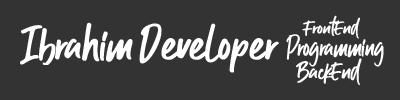
<style>
.page{position:relative;width:400px;height:100px;background:#333333}
.page>*{position:absolute;margin:0}
.t1{font:18.7px "GuthenBlootsPersonalUse";color:#ffffff;scale:1.09 1}
.t2{font:48px "GuthenBlootsPersonalUse";color:#ffffff;scale:0.95 1}
.t3{font:48px "GuthenBlootsPersonalUse";color:#ffffff}
.t4{font:28.4px "GuthenBlootsPersonalUse";color:#ffffff;scale:0.85 1}
.t5{font:24px "GuthenBlootsPersonalUse";color:#ffffff}
</style>
<div class="page">
<p class="t1" style="left:302px;top:15px;width:59px;height:24px">FrontEnd</p>
<p class="t2" style="left:20px;top:22px;width:113px;height:43px">Ibrahim</p>
<p class="t3" style="left:139px;top:23px;width:140px;height:50px">Developer</p>
<p class="t4" style="left:286px;top:34px;width:98px;height:33px">Programming</p>
<p class="t5" style="left:296px;top:58px;width:66px;height:27px">BackEnd</p>
</div>
